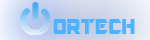
<style>
.page{position:relative;width:150px;height:40px}
.page>*{position:absolute;margin:0}
.t1{font:24.1px "ARDESTINE";color:#4db3ff}
</style>
<div class="page">
<p class="t1" style="left:53px;top:19px;width:82px;height:15px">ORTECH</p>
</div>
